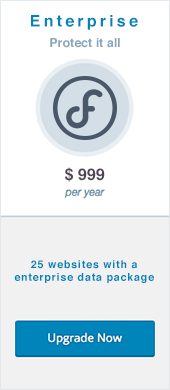
<style>
.page{position:relative;width:170px;height:390px;background:#ffffff}
.page>*{position:absolute;margin:0}
.t1{font:16px "Helvetica-Bold";letter-spacing:0.2em;color:#0085ba}
.t2{font:12.5px "Helvetica-Bold";color:#8ba6bc}
.t3{font:16px "Helvetica-Bold";color:#4e4453}
.t4{font:10.7px "Helvetica-Bold";letter-spacing:0.075em;color:#0085ba}
</style>
<div class="page">
<p class="t1" style="left:31px;top:15px;width:107px;height:15px">Enterprise</p>
<p class="t2" style="left:50px;top:38px;width:70px;height:10px">Protect it all</p>
<p class="t3" style="left:65px;top:167px;width:40px;height:15px">$ 999</p>
<p class="t4" style="left:14px;top:260px;width:140px;height:23px;text-align:center">25 websites with a<br>enterprise data package</p>
</div>
